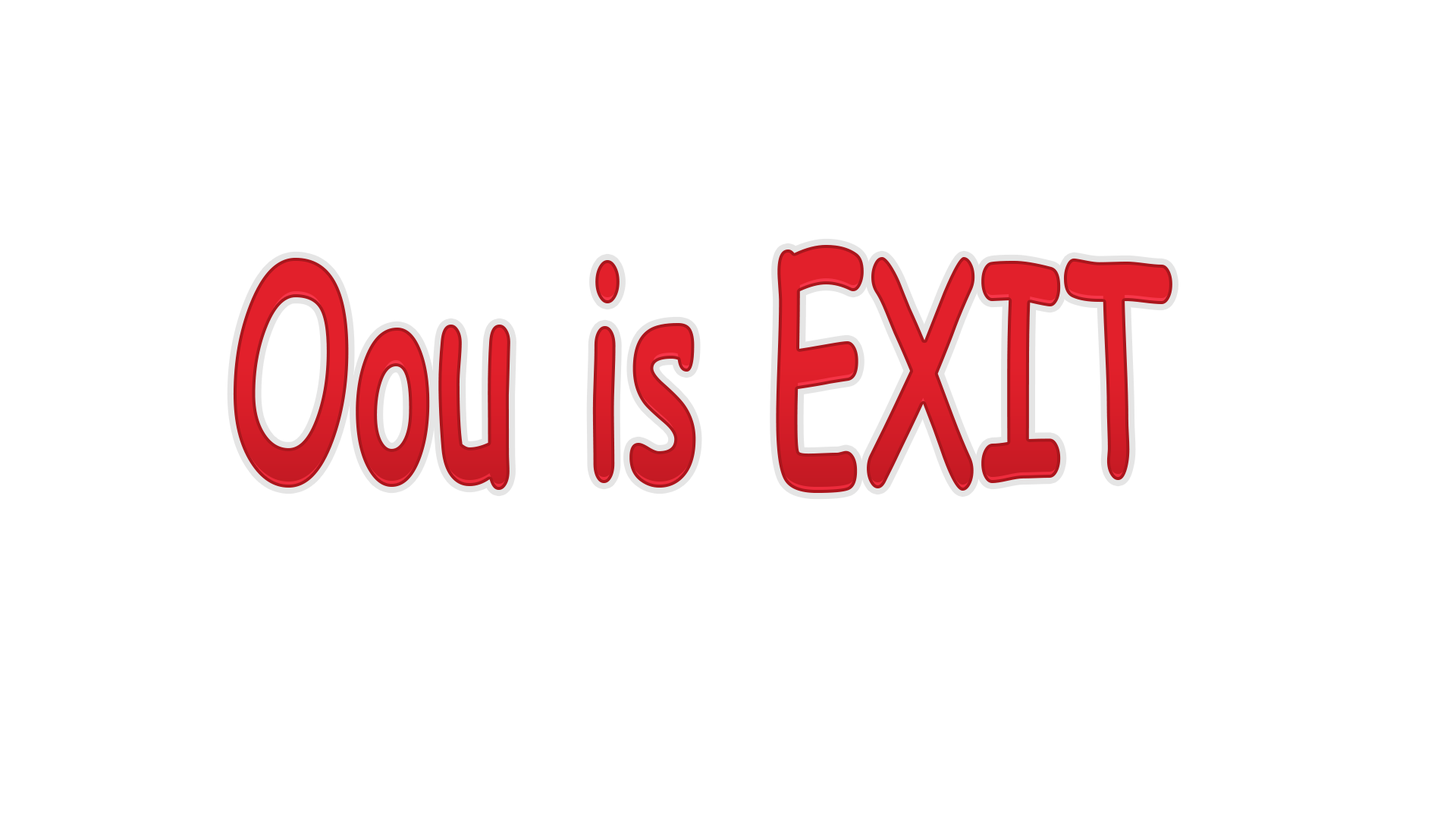
<style>
.page{position:relative;width:1456px;height:819px;background:#ffffff}
.page>*{position:absolute;margin:0}
.t1{font:297.8px "ComicSansMS-Bold";color:#d71e28;scale:0.52 1}
</style>
<div class="page">
<p class="t1" style="left:233px;top:245px;width:939px;height:248px">Oou is EXIT</p>
</div>
